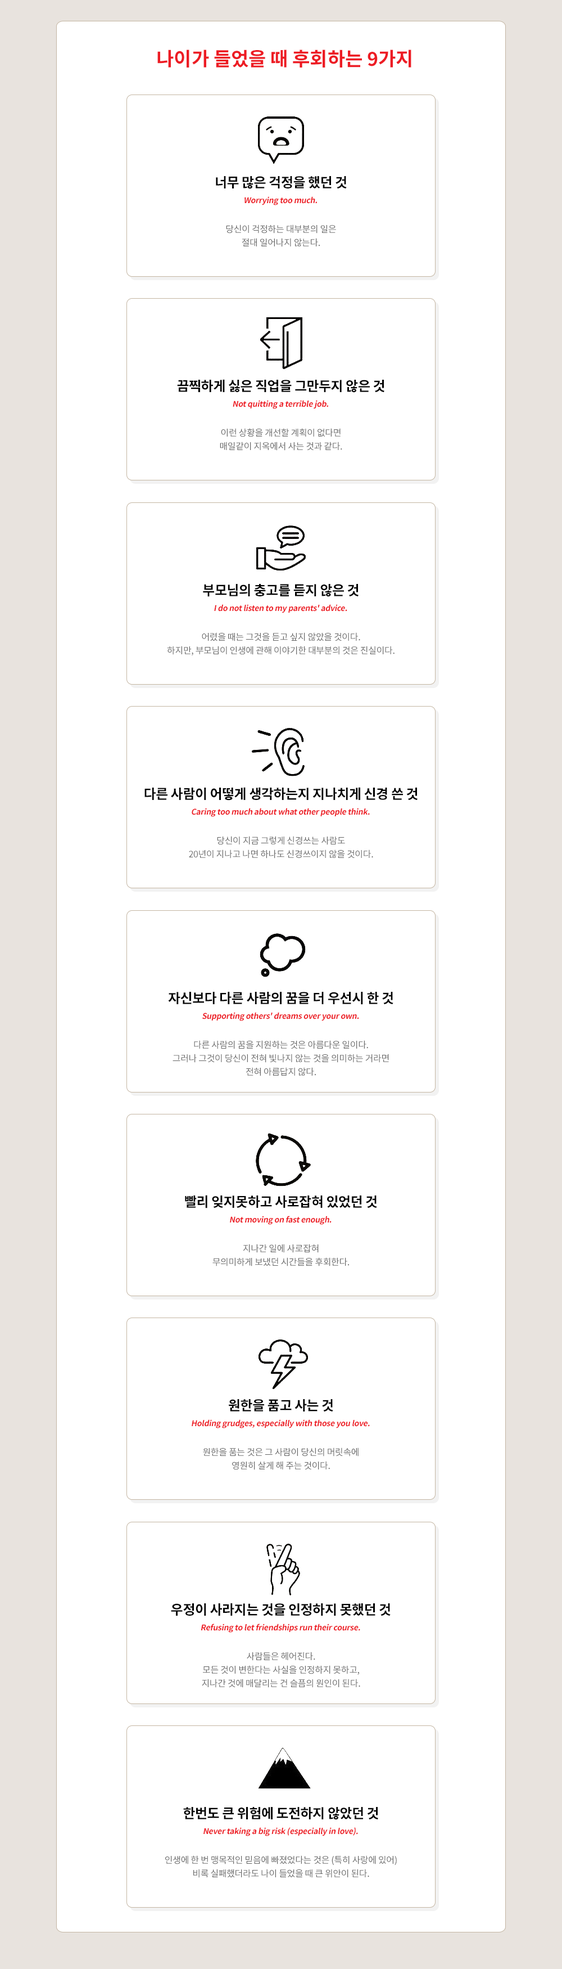
<style>
.page{position:relative;width:562px;height:1969px;background:#ffffff}
.page>*{position:absolute;margin:0}
.t1{font:19.1px "NotoSansKR-Bold";color:#ed1c24}
.t2{font:13.5px "NotoSansKR-Bold";letter-spacing:-0.02em;color:#000000}
.t3{font:7.9px "NotoSansKR-Bold";letter-spacing:-0.02em;color:#ed1c24;font-style:italic}
.t4{font:9px/13.5px "NotoSansKR-Regular";letter-spacing:-0.02em;color:#666666}
</style>
<div class="page">
<p class="t1" style="left:158px;top:50px;width:254px;height:18px">나이가 들었을 때 후회하는 9가지</p>
<p class="t2" style="left:216px;top:176px;width:131px;height:13px">너무 많은 걱정을 했던 것</p>
<p class="t3" style="left:245px;top:196px;width:72px;height:9px">Worrying too much.</p>
<p class="t4" style="left:226px;top:224px;width:110px;height:23px;text-align:center">당신이 걱정하는 대부분의 일은<br>절대 일어나지 않는다.</p>
<p class="t2" style="left:177px;top:379px;width:208px;height:14px">끔찍하게 싫은 직업을 그만두지 않은 것</p>
<p class="t3" style="left:233px;top:400px;width:95px;height:9px">Not quitting a terrible job.</p>
<p class="t4" style="left:220px;top:428px;width:123px;height:23px;text-align:center">이런 상황을 개선할 계획이 없다면<br>매일같이 지옥에서 사는 것과 같다.</p>
<p class="t2" style="left:203px;top:584px;width:156px;height:13px">부모님의 충고를 듣지 않은 것</p>
<p class="t3" style="left:214px;top:604px;width:134px;height:9px">I do not listen to my parents' advice.</p>
<p class="t4" style="left:167px;top:632px;width:228px;height:23px;text-align:center">어렸을 때는 그것을 듣고 싶지 않았을 것이다.<br>하지만, 부모님이 인생에 관해 이야기한 대부분의 것은 진실이다.</p>
<p class="t2" style="left:145px;top:787px;width:273px;height:13px">다른 사람이 어떻게 생각하는지 지나치게 신경 쓴 것</p>
<p class="t3" style="left:192px;top:808px;width:178px;height:9px">Caring too much about what other people think.</p>
<p class="t4" style="left:189px;top:836px;width:185px;height:22px;text-align:center">당신이 지금 그렇게 신경쓰는 사람도<br>20년이 지나고 나면 하나도 신경쓰이지 않을 것이다.</p>
<p class="t2" style="left:168px;top:992px;width:226px;height:13px">자신보다 다른 사람의 꿈을 더 우선시 한 것</p>
<p class="t3" style="left:202px;top:1012px;width:157px;height:9px">Supporting others' dreams over your own.</p>
<p class="t4" style="left:173px;top:1040px;width:216px;height:36px;text-align:center">다른 사람의 꿈을 지원하는 것은 아름다운 일이다.<br>그러나 그것이 당신이 전혀 빛나지 않는 것을 의미하는 거라면<br>전혀 아름답지 않다.</p>
<p class="t2" style="left:185px;top:1195px;width:192px;height:13px">빨리 잊지못하고 사로잡혀 있었던 것</p>
<p class="t3" style="left:230px;top:1216px;width:102px;height:9px">Not moving on fast enough.</p>
<p class="t4" style="left:213px;top:1244px;width:136px;height:22px;text-align:center">지나간 일에 사로잡혀<br>무의미하게 보냈던 시간들을 후회한다.</p>
<p class="t2" style="left:229px;top:1399px;width:105px;height:13px">원한을 품고 사는 것</p>
<p class="t3" style="left:192px;top:1419px;width:178px;height:9px">Holding grudges, especially with those you love.</p>
<p class="t4" style="left:203px;top:1447px;width:156px;height:23px;text-align:center">원한을 품는 것은 그 사람이 당신의 머릿속에<br>영원히 살게 해 주는 것이다.</p>
<p class="t2" style="left:171px;top:1603px;width:220px;height:13px">우정이 사라지는 것을 인정하지 못했던 것</p>
<p class="t3" style="left:201px;top:1623px;width:160px;height:9px">Refusing to let friendships run their course.</p>
<p class="t4" style="left:202px;top:1652px;width:159px;height:36px;text-align:center">사람들은 헤어진다.<br>모든 것이 변한다는 사실을 인정하지 못하고,<br>지나간 것에 매달리는 건 슬픔의 원인이 된다.</p>
<p class="t2" style="left:183px;top:1807px;width:196px;height:13px">한번도 큰 위험에 도전하지 않았던 것</p>
<p class="t3" style="left:204px;top:1827px;width:154px;height:9px">Never taking a big risk (especially in love).</p>
<p class="t4" style="left:165px;top:1855px;width:232px;height:23px;text-align:center">인생에 한 번 맹목적인 믿음에 빠졌었다는 것은 (특히 사랑에 있어)<br>비록 실패했더라도 나이 들었을 때 큰 위안이 된다.</p>
</div>
